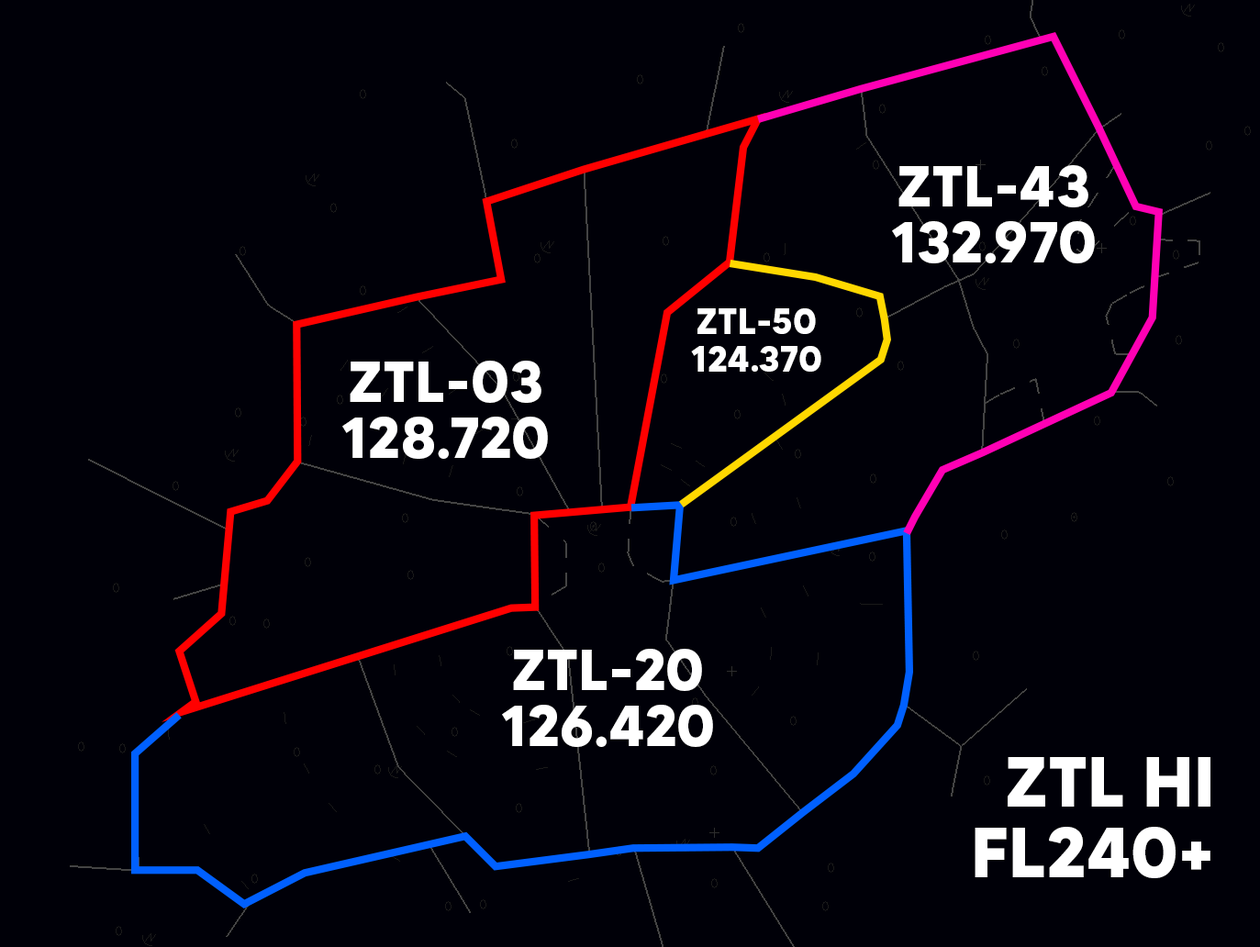
<style>
.page{position:relative;width:1260px;height:947px;background:#000008}
.page>*{position:absolute;margin:0}
.t1{font:57.5px/56.3px "MADETOMMY-Bold";color:#ffffff}
.t2{font:35.5px/37.9px "MADETOMMY-Bold";color:#ffffff}
.t3{font:70.9px/70.9px "MADETOMMY-Bold";color:#ffffff}
</style>
<div class="page">
<p class="t1" style="left:892px;top:165px;width:202px;height:98px;text-align:center">ZTL-43<br>132.970</p>
<p class="t2" style="left:691px;top:308px;width:130px;height:64px;text-align:center">ZTL-50<br>124.370</p>
<p class="t1" style="left:342px;top:361px;width:206px;height:98px;text-align:center">ZTL-03<br>128.720</p>
<p class="t1" style="left:502px;top:649px;width:211px;height:98px;text-align:center">ZTL-20<br>126.420</p>
<p class="t3" style="left:974px;top:757px;width:236px;height:121px;text-align:right">ZTL HI<br>FL240+</p>
</div>
